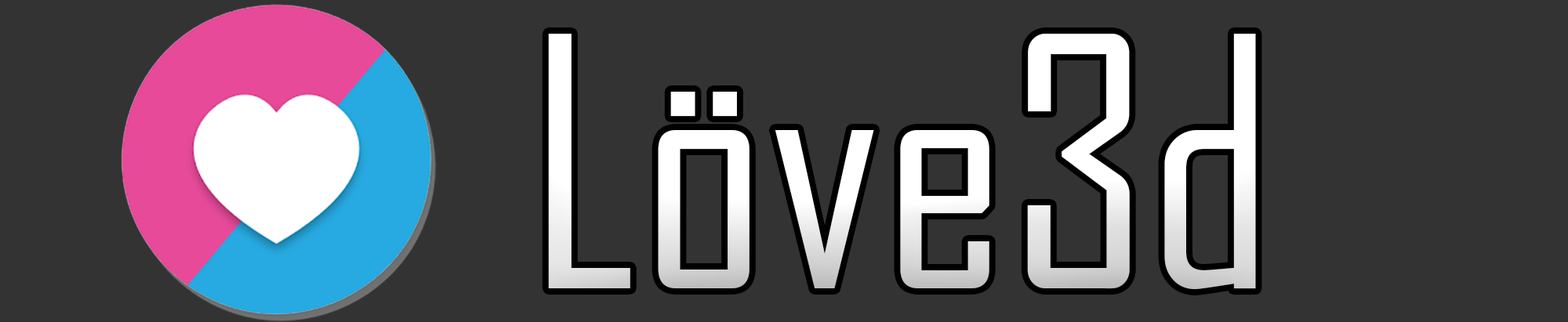
<style>
.page{position:relative;width:1568px;height:322px;background:#333333}
.page>*{position:absolute;margin:0}
.t1{font:333.2px "AgencyFB-Reg";color:#ffffff}
</style>
<div class="page">
<p class="t1" style="left:548px;top:34px;width:708px;height:255px">Löve3d</p>
</div>
